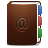
<style>
.page{position:relative;width:48px;height:48px;background:#ffffff}
.page>*{position:absolute;margin:0}
.t1{font:14.8px "LucidaGrande-Bold";letter-spacing:0.02em;color:#201511}
.t2{font:14.8px "LucidaGrande-Bold";letter-spacing:0.02em}
</style>
<div class="page">
<p class="t1" style="left:15px;top:17px;width:14px;height:14px">@</p>
<p class="t2" style="left:15px;top:18px;width:14px;height:14px">@</p>
</div>
